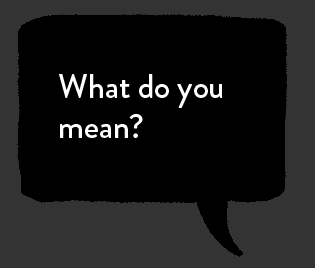
<style>
.page{position:relative;width:315px;height:268px;background:#000000}
.page>*{position:absolute;margin:0}
.t1{font:33.3px "BrandonGrotesque-Medium";color:#ffffff}
</style>
<div class="page">
<p class="t1" style="left:59px;top:74px;width:163px;height:64px">What do you mean?</p>
</div>
